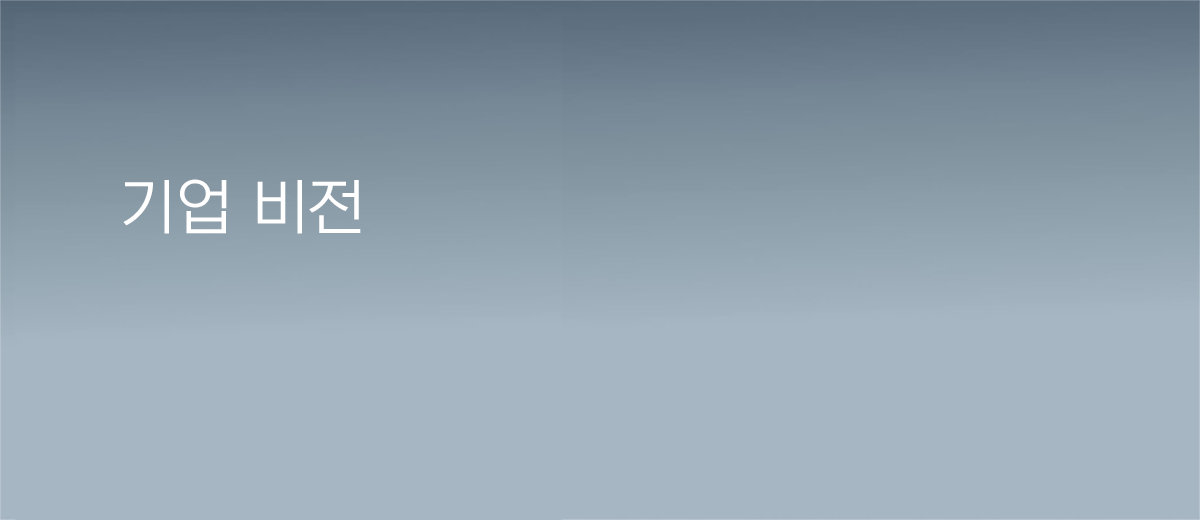
<style>
.page{position:relative;width:1200px;height:520px;background:#a6b6c3}
.page>*{position:absolute;margin:0}
.t1{font:60px "NEXONLv1GothicLowOTFRegular";color:#ffffff}
</style>
<div class="page">
<p class="t1" style="left:123px;top:179px;width:238px;height:55px">기업 비전</p>
</div>
